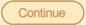
<style>
.page{position:relative;width:86px;height:25px;background:#fcebc0}
.page>*{position:absolute;margin:0}
.t1{font:12px "ArialMT";letter-spacing:-0.04em;color:#c99b67;font-weight:bold}
</style>
<div class="page">
<p class="t1" style="left:18px;top:8px;width:48px;height:10px">Continue</p>
</div>
